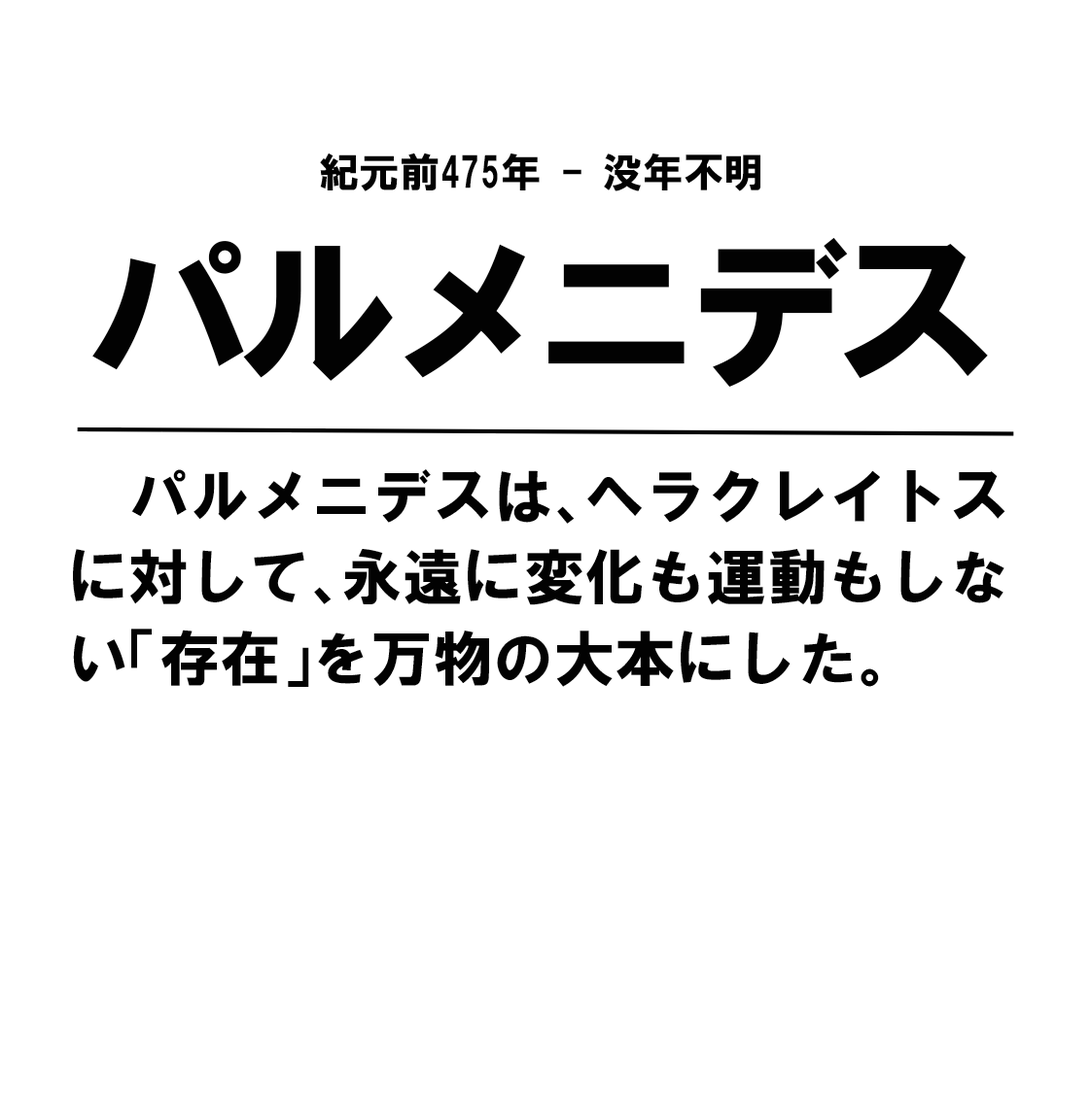
<style>
.page{position:relative;width:1091px;height:1093px;background:#ffffff}
.page>*{position:absolute;margin:0}
.t1{font:40.5px "HGSoeiKakugothicUB";color:#020202}
.t2{font:170.1px "HGSoeiKakugothicUB";letter-spacing:-0.12em;color:#020202}
.t3{font:60.7px/81px "HGSoeiKakugothicUB";color:#020202}
</style>
<div class="page">
<p class="t1" style="left:320px;top:153px;width:440px;height:38px">紀元前475年 - 没年不明</p>
<p class="t2" style="left:92px;top:237px;width:896px;height:150px">パルメニデス</p>
<p class="t3" style="left:73px;top:469px;width:932px;height:218px">パルメニデスは、ヘラクレイトスに対して、永遠に変化も運動もしない「存在」を万物の大本にした。</p>
</div>
